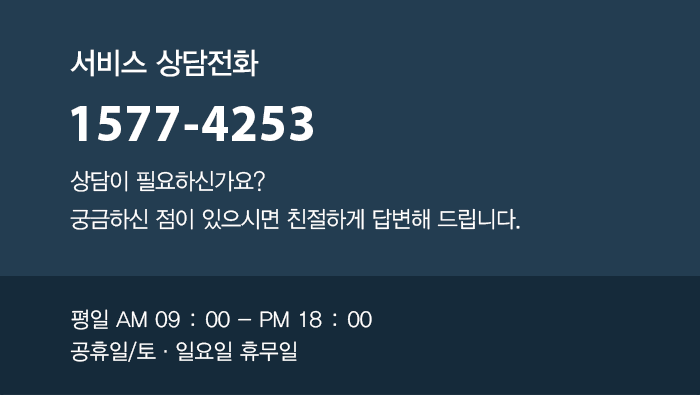
<style>
.page{position:relative;width:700px;height:395px;background:#233d51}
.page>*{position:absolute;margin:0}
.t1{font:30px "YDVYGO33";letter-spacing:-0.025em;color:#ffffff;scale:0.95 1}
.t2{font:53px "MyriadPro-Bold";letter-spacing:0.025em;color:#ffffff;scale:0.95 1}
.t3{font:23px/38px "YDVYGO32";letter-spacing:-0.025em;color:#ffffff;scale:0.95 1}
.t4{font:23px/31.6px "YDVYGO32";letter-spacing:-0.025em;color:#ffffff;scale:0.95 1}
.t5{font:22px/25.9px "YDVYGO32";color:#ffffff}
.t6{font:22px/25.9px "YDVYGO32";color:#ffffff;scale:0.95 1}
.t7{font:22px/32px "YDVYGO32";color:#ffffff;scale:0.95 1}
</style>
<div class="page">
<p class="t1" style="left:70px;top:49px;width:189px;height:28px">서비스 상담전화</p>
<p class="t2" style="left:71px;top:106px;width:242px;height:35px">1577-4253</p>
<p class="t3" style="left:70px;top:170px;width:450px;height:60px"><span class="t4">상담이 필요하신가요?<br></span>궁금하신 점이 있으시면 친절하게 답변해 드립니다.</p>
<p class="t5" style="left:70px;top:309px;width:302px;height:53px"><span class="t6">평일 </span>AM 09 : 00 - PM 18 : 00<br><span class="t7">공휴일/토·일요일 휴무일</span></p>
</div>
